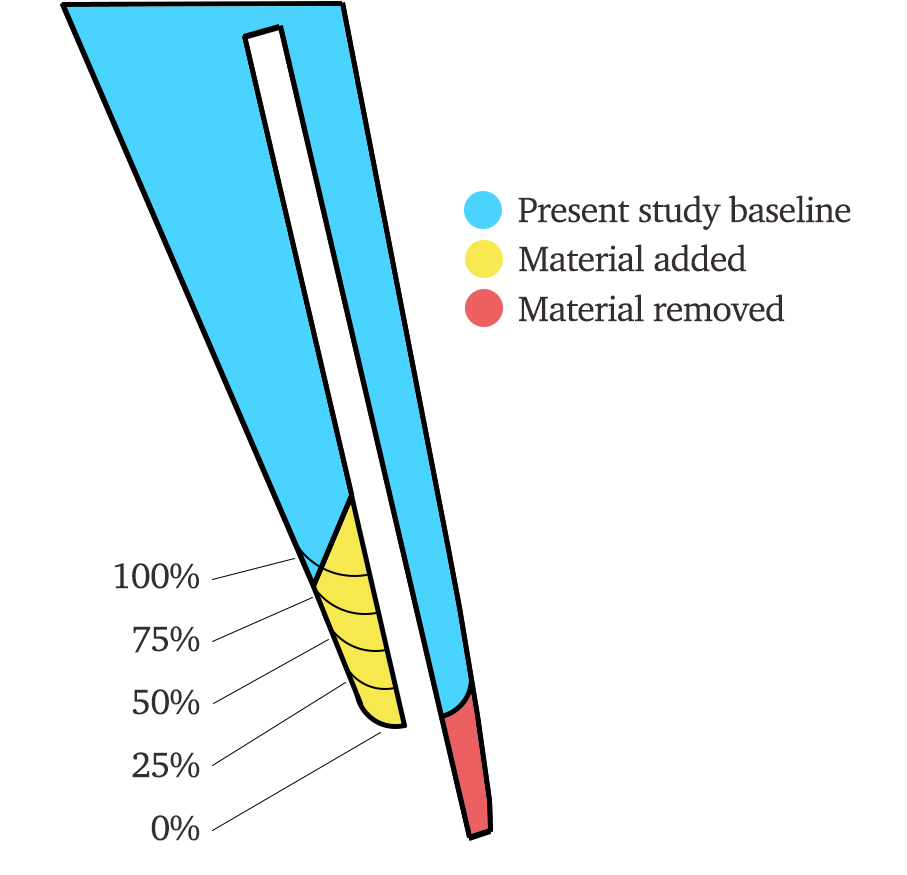
<style>
.page{position:relative;width:907px;height:875px;background:#ffffff}
.page>*{position:absolute;margin:0}
.t1{font:36px "Charter-Roman";letter-spacing:-0.02em;color:#352e31}
</style>
<div class="page">
<p class="t1" style="left:518px;top:195px;width:333px;height:35px">Present study baseline</p>
<p class="t1" style="left:519px;top:244px;width:227px;height:28px">Material added</p>
<p class="t1" style="left:518px;top:294px;width:267px;height:28px">Material removed</p>
<p class="t1" style="left:114px;top:563px;width:85px;height:26px">100%</p>
<p class="t1" style="left:133px;top:626px;width:67px;height:27px">75%</p>
<p class="t1" style="left:132px;top:689px;width:68px;height:26px">50%</p>
<p class="t1" style="left:132px;top:752px;width:68px;height:26px">25%</p>
<p class="t1" style="left:151px;top:815px;width:49px;height:26px">0%</p>
</div>
